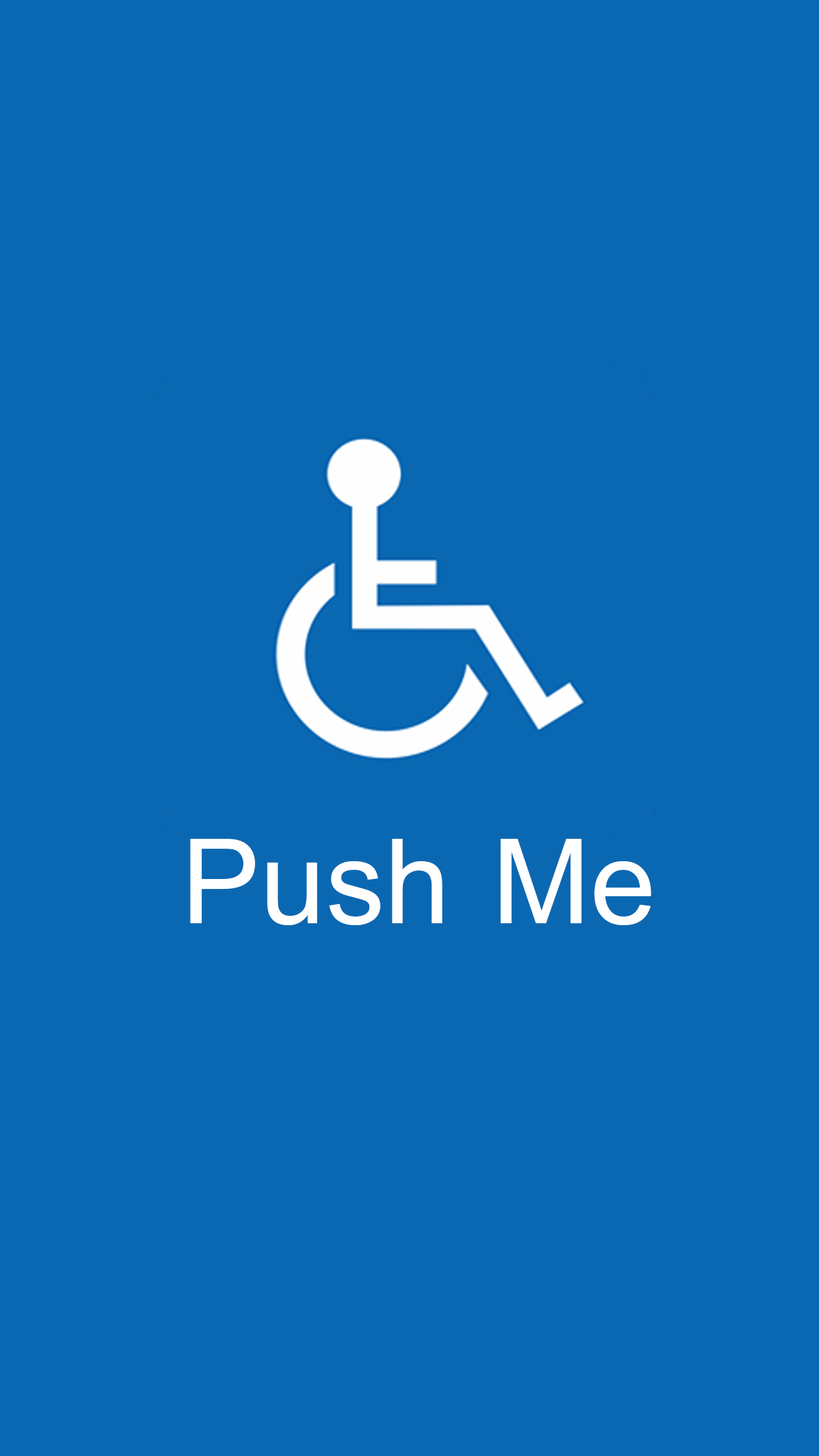
<style>
.page{position:relative;width:819px;height:1456px;background:#0a68b2}
.page>*{position:absolute;margin:0}
.t1{font:131.2px "SimplifiedArabic";color:#ffffff}
</style>
<div class="page">
<p class="t1" style="left:190px;top:839px;width:461px;height:86px">Push Me</p>
</div>
